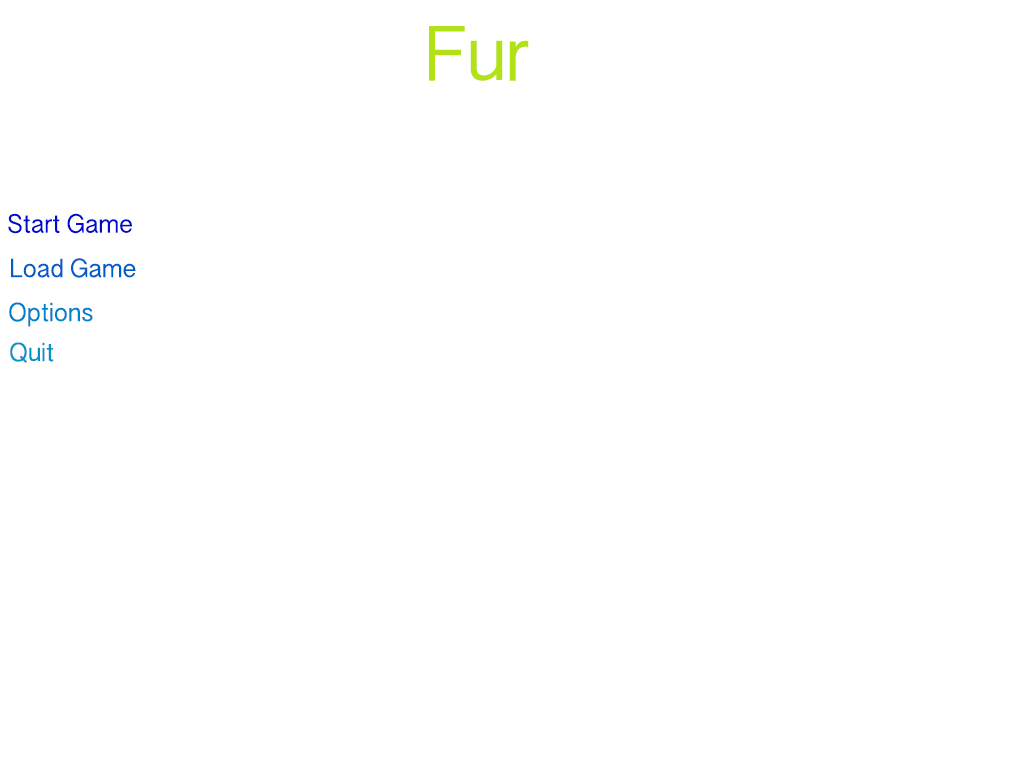
<style>
.page{position:relative;width:1024px;height:768px;background:#ffffff}
.page>*{position:absolute;margin:0}
.t1{font:72px "SinhalaSangamMN";color:#b2e115}
.t2{font:24px "SinhalaSangamMN";color:#000acb}
.t3{font:24px "SinhalaSangamMN";color:#005bcb}
.t4{font:24px "SinhalaSangamMN";color:#0081cb}
.t5{font:24px "SinhalaSangamMN";color:#0094cb}
</style>
<div class="page">
<p class="t1" style="left:429px;top:26px;width:100px;height:55px">Fur</p>
<p class="t2" style="left:8px;top:213px;width:124px;height:21px">Start Game</p>
<p class="t3" style="left:11px;top:258px;width:125px;height:20px">Load Game</p>
<p class="t4" style="left:9px;top:302px;width:84px;height:25px">Options</p>
<p class="t5" style="left:10px;top:342px;width:44px;height:21px">Quit</p>
</div>
